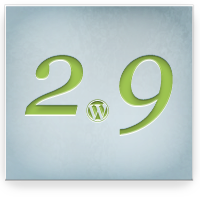
<style>
.page{position:relative;width:200px;height:200px}
.page>*{position:absolute;margin:0}
.t1{font:110px "Georgia-Italic";color:#95b94d}
</style>
<div class="page">
<p class="t1" style="left:24px;top:55px;width:149px;height:80px">2 9</p>
<p class="t1" style="left:24px;top:55px;width:149px;height:80px">2 9</p>
</div>
